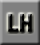
<style>
.page{position:relative;width:40px;height:45px;background:#808080}
.page>*{position:absolute;margin:0}
.t1{font:24px "GothicXB-HM"}
</style>
<div class="page">
<p class="t1" style="left:8px;top:14px;width:24px;height:18px">LH</p>
</div>
